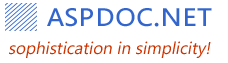
<style>
.page{position:relative;width:228px;height:63px;background:#ffffff}
.page>*{position:absolute;margin:0}
.t1{font:34px "SegoeUI";color:#3366cc;font-variant:small-caps}
.t2{font:17px "SegoeUI";color:#cc3300;font-style:italic}
</style>
<div class="page">
<p class="t1" style="left:47px;top:8px;width:165px;height:19px">aspdoc.net</p>
<p class="t2" style="left:9px;top:41px;width:202px;height:17px">sophistication in simplicity!</p>
</div>
